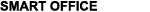
<style>
.page{position:relative;width:150px;height:12px;background:#ffffff}
.page>*{position:absolute;margin:0}
.t1{font:13px "Arial-BoldMT";color:#000000}
</style>
<div class="page">
<p class="t1" style="left:0px;top:1px;width:97px;height:10px">SMART OFFICE</p>
</div>
